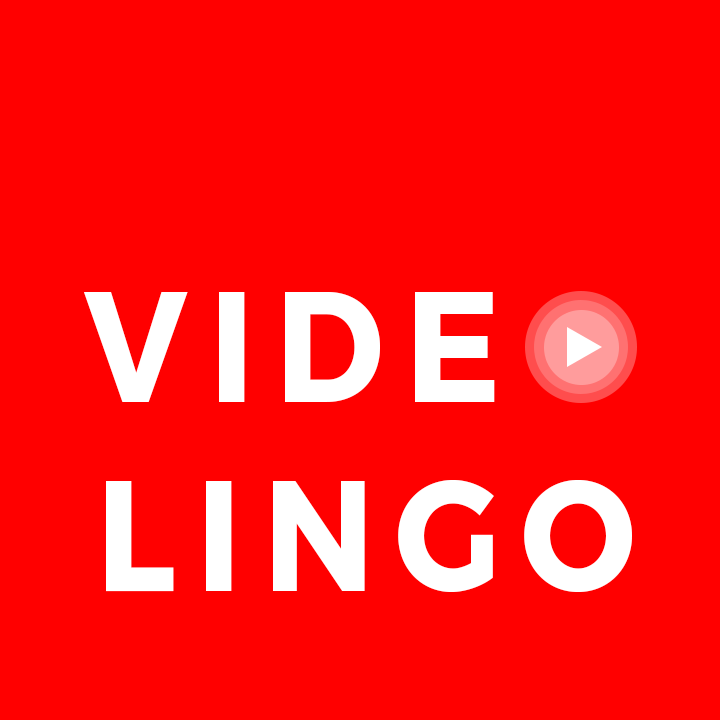
<style>
.page{position:relative;width:720px;height:720px;background:#ff0000}
.page>*{position:absolute;margin:0}
.t1{font:15.7px "Montserrat-Bold";letter-spacing:0.15em;color:#ffffff;scale:0.9 1}
.t2{font:15.7px "Montserrat-Bold";letter-spacing:0.15em;color:#ff0000;scale:0.9 1}
</style>
<div class="page">
<p class="t1" style="left:84px;top:291px;width:548px;height:301px;text-align:right">VIDE<span class="t2">O<br></span>LINGO</p>
</div>
